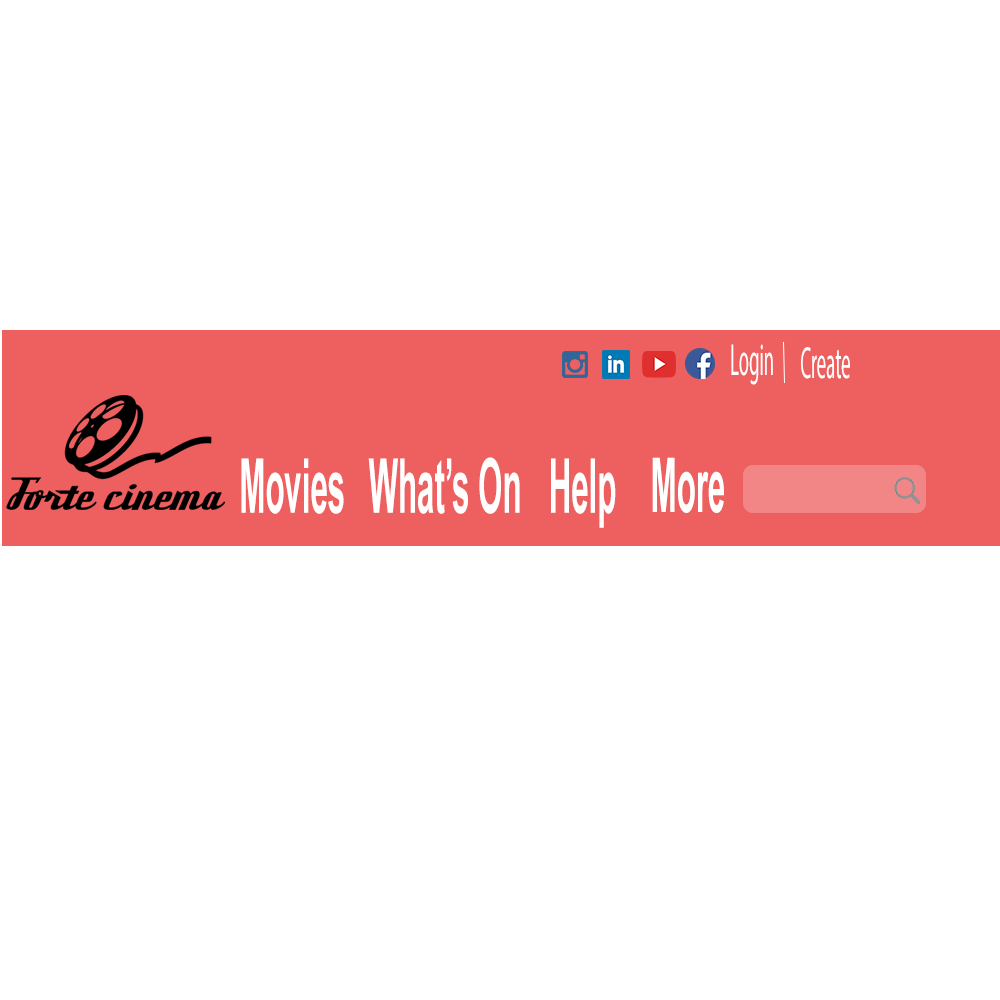
<style>
.page{position:relative;width:1000px;height:1000px;background:#ffffff}
.page>*{position:absolute;margin:0}
.t1{font:45.4px "MyriadPro-Regular";color:#ffffff;scale:0.41 1}
.t2{font:75.7px "Arial-BoldMT";color:#ffffff;scale:0.41 1}
</style>
<div class="page">
<p class="t1" style="left:731px;top:344px;width:42px;height:41px">Login</p>
<p class="t1" style="left:801px;top:347px;width:49px;height:32px">Create</p>
<p class="t2" style="left:241px;top:458px;width:103px;height:56px">Movies</p>
<p class="t2" style="left:368px;top:457px;width:152px;height:57px">What’s On</p>
<p class="t2" style="left:551px;top:458px;width:65px;height:70px">Help</p>
<p class="t2" style="left:652px;top:457px;width:72px;height:56px">More</p>
</div>
